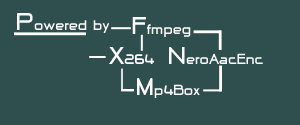
<style>
.page{position:relative;width:300px;height:125px;background:#2f4f4f}
.page>*{position:absolute;margin:0}
.t1{font:18px "-@-D-RCW2550v.2.00-";color:#ffffff}
.t2{font:30px "-@-D-RCW2550v.2.00-";color:#ffffff}
</style>
<div class="page">
<p class="t1" style="left:17px;top:13px;width:93px;height:20px"><span class="t2">P</span>owered by</p>
<p class="t1" style="left:132px;top:17px;width:59px;height:20px"><span class="t2">F</span>fmpeg</p>
<p class="t1" style="left:109px;top:47px;width:45px;height:17px"><span class="t2">X</span>264</p>
<p class="t1" style="left:169px;top:47px;width:94px;height:17px"><span class="t2">N</span>eroAacEnc</p>
<p class="t1" style="left:137px;top:78px;width:63px;height:20px"><span class="t2">M</span>p4Box</p>
</div>
